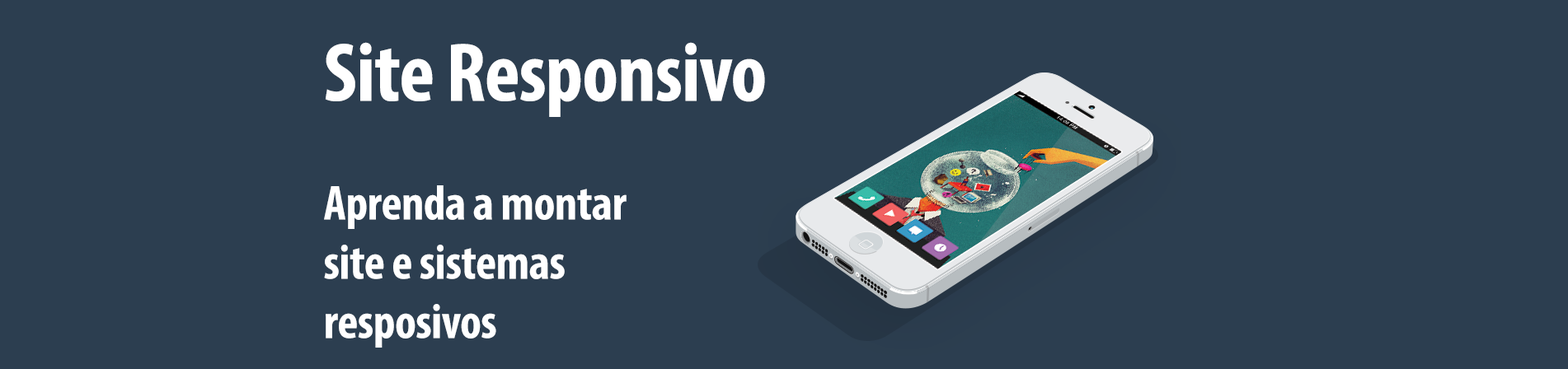
<style>
.page{position:relative;width:1568px;height:369px;background:#2c3e50}
.page>*{position:absolute;margin:0}
.t1{font:49.5px "MyriadPro-BoldCond";letter-spacing:-0.01em;color:#ffffff}
.t2{font:84.1px "MyriadPro-BoldCond";letter-spacing:-0.01em;color:#ffffff}
</style>
<div class="page">
<p class="t1" style="left:324px;top:42px;width:441px;height:306px"><span class="t2">Site Responsivo<br></span><br>Aprenda a montar <br>site e sistemas<br>resposivos</p>
</div>
